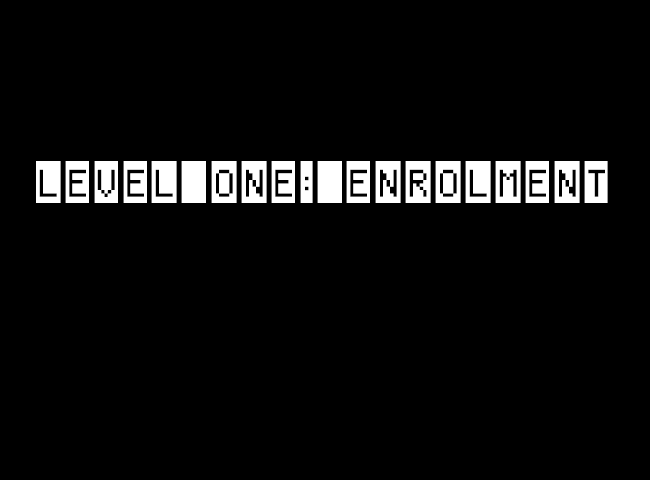
<style>
.page{position:relative;width:650px;height:480px;background:#000000}
.page>*{position:absolute;margin:0}
.t1{font:60px "Pixeland";letter-spacing:0.1em;color:#ffffff}
</style>
<div class="page">
<p class="t1" style="left:36px;top:161px;width:572px;height:42px">Level One: Enrolment</p>
</div>
